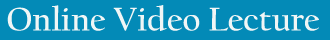
<style>
.page{position:relative;width:330px;height:40px;background:#038ab7}
.page>*{position:absolute;margin:0}
.t1{font:34.2px "CalifornianFB-Bold";color:#f0f6f6}
</style>
<div class="page">
<p class="t1" style="left:7px;top:5px;width:312px;height:26px">Online Video Lecture</p>
</div>
